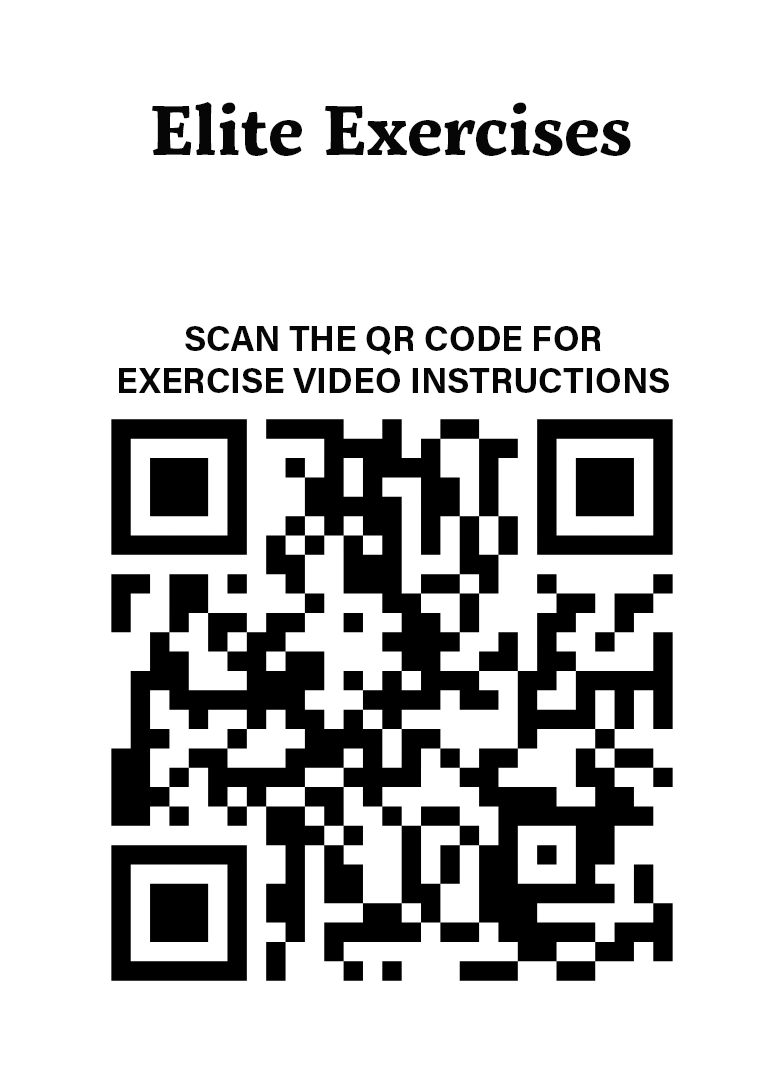
<style>
.page{position:relative;width:784px;height:1066px;background:#ffffff}
.page>*{position:absolute;margin:0}
.t1{font:70px "ServusSlab-Bold";color:#060606}
.t2{font:35px "AcuminPro-Bold";color:#060606}
</style>
<div class="page">
<p class="t1" style="left:152px;top:102px;width:479px;height:54px">Elite Exercises</p>
<p class="t2" style="left:119px;top:326px;width:550px;height:67px;text-align:center">SCAN THE QR CODE FOR <br>EXERCISE VIDEO INSTRUCTIONS</p>
</div>
